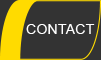
<style>
.page{position:relative;width:101px;height:60px;background:#333333}
.page>*{position:absolute;margin:0}
.t1{font:13.7px "ArialMT";color:#ffffff;text-transform:uppercase}
</style>
<div class="page">
<p class="t1" style="left:26px;top:24px;width:69px;height:10px">contact</p>
</div>
